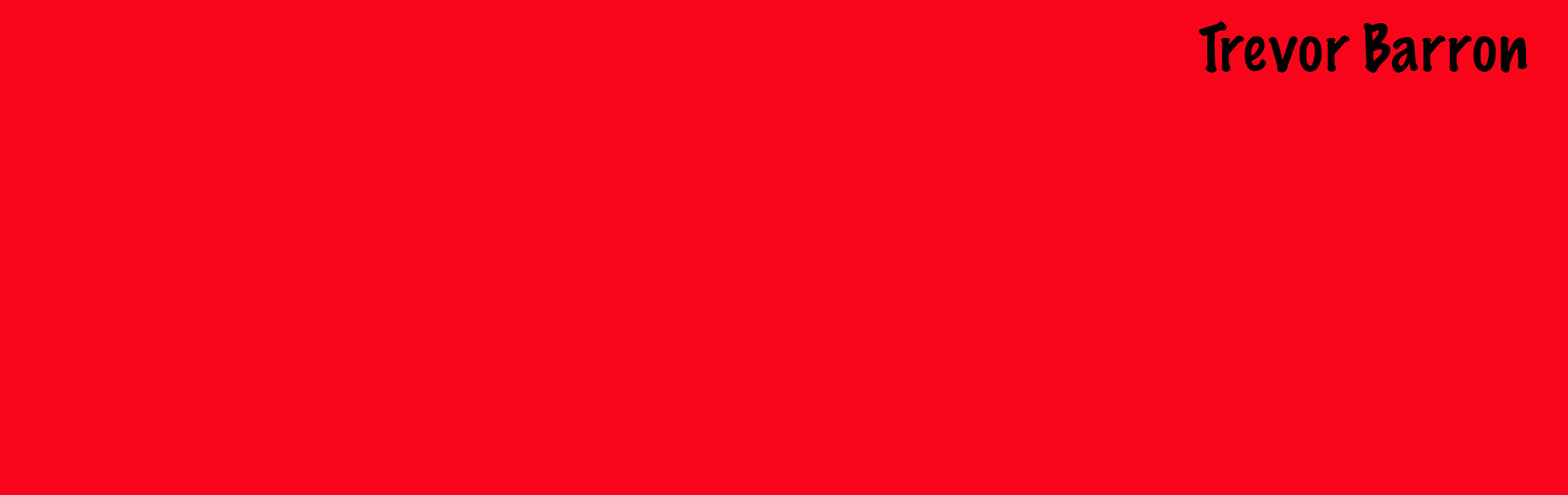
<style>
.page{position:relative;width:1568px;height:495px;background:#f8051c}
.page>*{position:absolute;margin:0}
.t1{font:59.4px "MarkerFelt-Thin";color:#010101}
</style>
<div class="page">
<p class="t1" style="left:1198px;top:21px;width:330px;height:52px">Trevor Barron</p>
</div>
